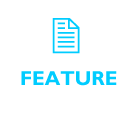
<style>
.page{position:relative;width:128px;height:128px;background:#ffffff}
.page>*{position:absolute;margin:0}
.t1{font:20px "GillSansMTPro-Bold";color:#00ccff}
</style>
<div class="page">
<p class="t1" style="left:21px;top:71px;width:96px;height:15px">FEATURE</p>
</div>
